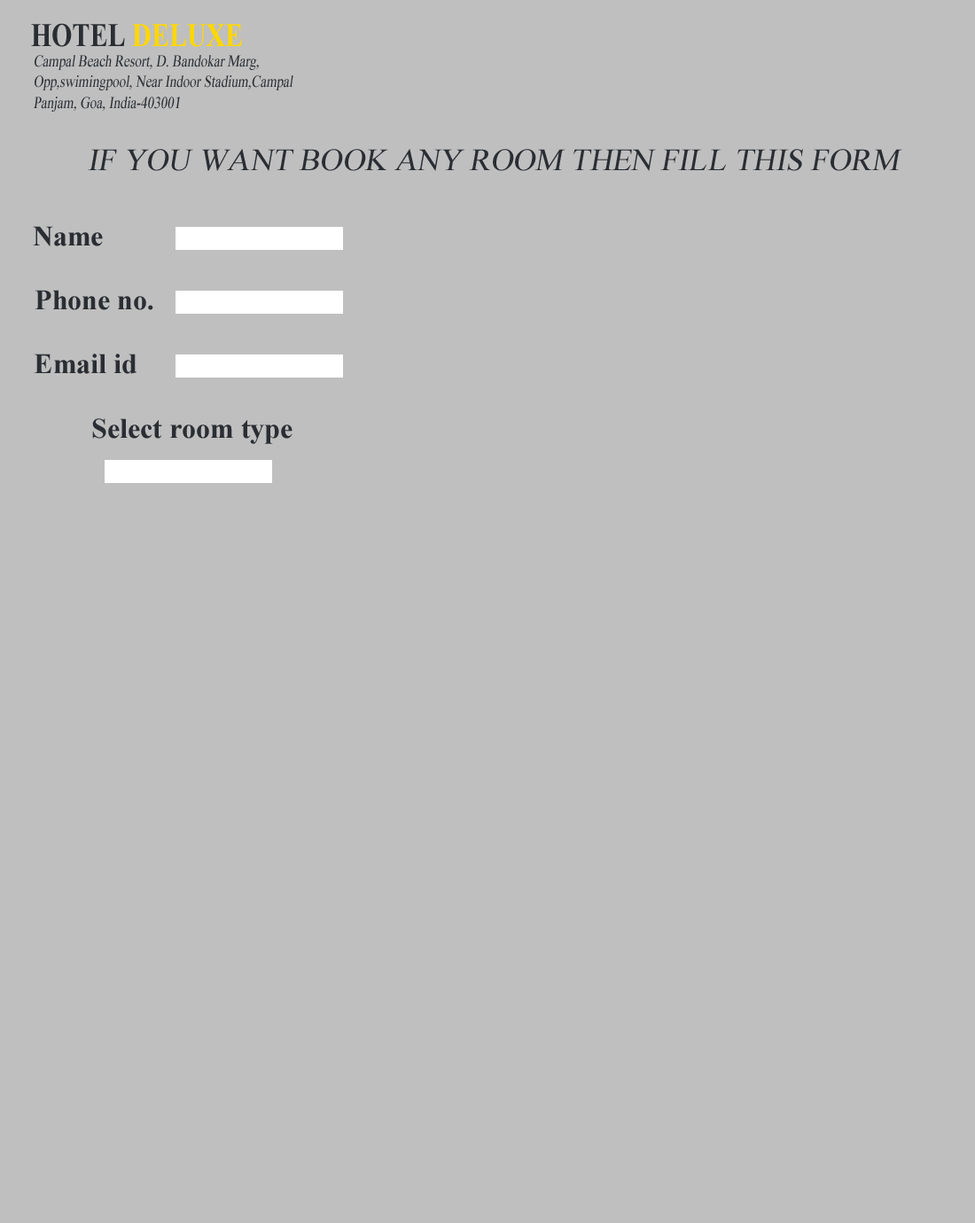
<style>
.page{position:relative;width:975px;height:1223px;background:#bfbfbf}
.page>*{position:absolute;margin:0}
.t1{font:33.2px "TimesNewRomanPS-BoldMT";color:#ffd700;scale:0.8 1}
.t2{font:33.2px "TimesNewRomanPS-BoldMT";color:#2a2e33;scale:0.8 1}
.t3{font:16.6px/21px "TimesNewRomanPSMT";color:#2a2e33;font-style:italic;scale:0.8 1}
.t4{font:16.6px/33.2px "TimesNewRomanPSMT";color:#2a2e33;font-style:italic;scale:0.8 1}
.t5{font:31px "TimesNewRomanPSMT";color:#2a2e33;font-style:italic}
.t6{font:28.4px "TimesNewRomanPS-BoldMT";color:#2a2e33}
</style>
<div class="page">
<p class="t1" style="left:31px;top:23px;width:211px;height:24px"><span class="t2">HOTEL </span>DELUXE</p>
<p class="t3" style="left:33px;top:55px;width:260px;height:57px"><span class="t4">Campal Beach Resort, </span>D. Bandokar Marg,<br>Opp,swimingpool, Near Indoor Stadium,Campal<br>Panjam, Goa, India-403001</p>
<p class="t5" style="left:88px;top:149px;width:814px;height:22px">IF YOU WANT BOOK ANY ROOM THEN FILL THIS FORM</p>
<p class="t6" style="left:33px;top:226px;width:70px;height:20px">Name</p>
<p class="t6" style="left:35px;top:290px;width:118px;height:20px">Phone no.</p>
<p class="t6" style="left:34px;top:354px;width:102px;height:20px">Email id</p>
<p class="t6" style="left:92px;top:418px;width:200px;height:26px">Select room type</p>
</div>
